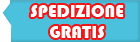
<style>
.page{position:relative;width:140px;height:42px;background:#4bc1dd}
.page>*{position:absolute;margin:0}
.t1{font:18px "Bauhaus93";color:#ffffff}
</style>
<div class="page">
<p class="t1" style="left:30px;top:5px;width:94px;height:33px;text-align:center">SPEDIZIONE GRATIS</p>
</div>
